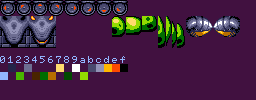
<style>
.page{position:relative;width:256px;height:100px;background:#411140}
.page>*{position:absolute;margin:0}
.t1{font:7.5px "MSX-Screen1";color:#92b6ff;scale:1.03 1}
</style>
<div class="page">
<p class="t1" style="left:0px;top:56px;width:125px;height:7px">0123456789abcdef</p>
</div>
